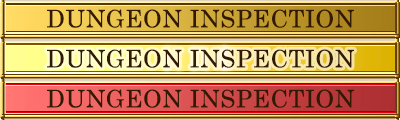
<style>
.page{position:relative;width:400px;height:120px}
.page>*{position:absolute;margin:0}
.t1{font:24px "CenturySchoolbook";letter-spacing:0.025em;color:#321a02}
</style>
<div class="page">
<p class="t1" style="left:47px;top:9px;width:307px;height:19px">DUNGEON INSPECTION</p>
<p class="t1" style="left:47px;top:49px;width:307px;height:19px">DUNGEON INSPECTION</p>
<p class="t1" style="left:47px;top:89px;width:307px;height:19px">DUNGEON INSPECTION</p>
</div>
